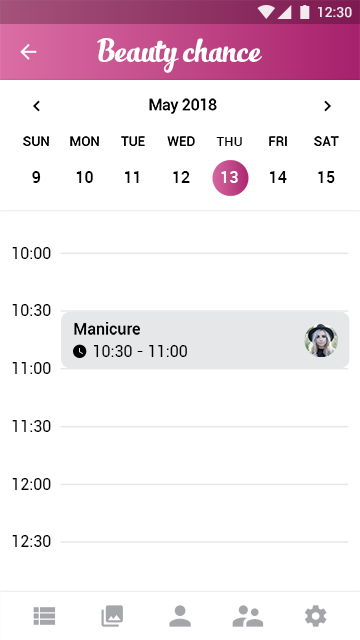
<style>
.page{position:relative;width:360px;height:640px;background:#ffffff}
.page>*{position:absolute;margin:0}
.t1{font:14px "Roboto-Medium";color:#ffffff}
.t2{font:24px "SlimTony-Italic";color:#ffffff}
.t3{font:16px "Roboto-Medium";letter-spacing:-0.023em;color:#000000}
.t4{font:13.3px "Roboto-Medium";color:#000000}
.t5{font:16px "Roboto-Medium";color:#000000}
.t6{font:16px "Roboto-Medium";color:#ffffff}
.t7{font:16px "Roboto-Regular";color:#000000}
</style>
<div class="page">
<p class="t1" style="left:318px;top:7px;width:34px;height:11px">12:30</p>
<p class="t2" style="left:97px;top:38px;width:165px;height:35px">Beauty chance</p>
<p class="t3" style="left:149px;top:98px;width:68px;height:16px">May 2018</p>
<p class="t4" style="left:23px;top:136px;width:26px;height:10px">SUN</p>
<p class="t4" style="left:70px;top:136px;width:29px;height:10px">MON</p>
<p class="t4" style="left:121px;top:136px;width:24px;height:10px">TUE</p>
<p class="t4" style="left:167px;top:136px;width:28px;height:10px">WED</p>
<p class="t4" style="left:216px;top:137px;width:26px;height:9px">THU</p>
<p class="t4" style="left:269px;top:136px;width:18px;height:10px">FRI</p>
<p class="t4" style="left:314px;top:136px;width:25px;height:10px">SAT</p>
<p class="t5" style="left:32px;top:171px;width:9px;height:12px">9</p>
<p class="t5" style="left:76px;top:171px;width:17px;height:12px">10</p>
<p class="t5" style="left:125px;top:171px;width:14px;height:12px">11</p>
<p class="t5" style="left:173px;top:171px;width:17px;height:12px">12</p>
<p class="t6" style="left:221px;top:171px;width:17px;height:12px">13</p>
<p class="t5" style="left:270px;top:171px;width:17px;height:12px">14</p>
<p class="t5" style="left:318px;top:171px;width:17px;height:12px">15</p>
<p class="t7" style="left:12px;top:247px;width:39px;height:12px">10:00</p>
<p class="t7" style="left:12px;top:304px;width:39px;height:12px">10:30</p>
<p class="t5" style="left:74px;top:322px;width:66px;height:13px">Manicure</p>
<p class="t7" style="left:93px;top:345px;width:94px;height:12px">10:30 - 11:00</p>
<p class="t7" style="left:12px;top:362px;width:39px;height:12px">11:00</p>
<p class="t7" style="left:12px;top:420px;width:39px;height:12px">11:30</p>
<p class="t7" style="left:12px;top:478px;width:39px;height:12px">12:00</p>
<p class="t7" style="left:12px;top:535px;width:39px;height:12px">12:30</p>
</div>
